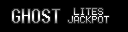
<style>
.page{position:relative;width:128px;height:32px;background:#000000}
.page>*{position:absolute;margin:0}
.t1{font:18px "Terminal"}
.t2{font:10px/8px "Terminal"}
</style>
<div class="page">
<p class="t1" style="left:12px;top:9px;width:48px;height:14px">GHOST</p>
<p class="t2" style="left:68px;top:8px;width:41px;height:15px;text-align:center">LITES<br>JACKPOT</p>
</div>
